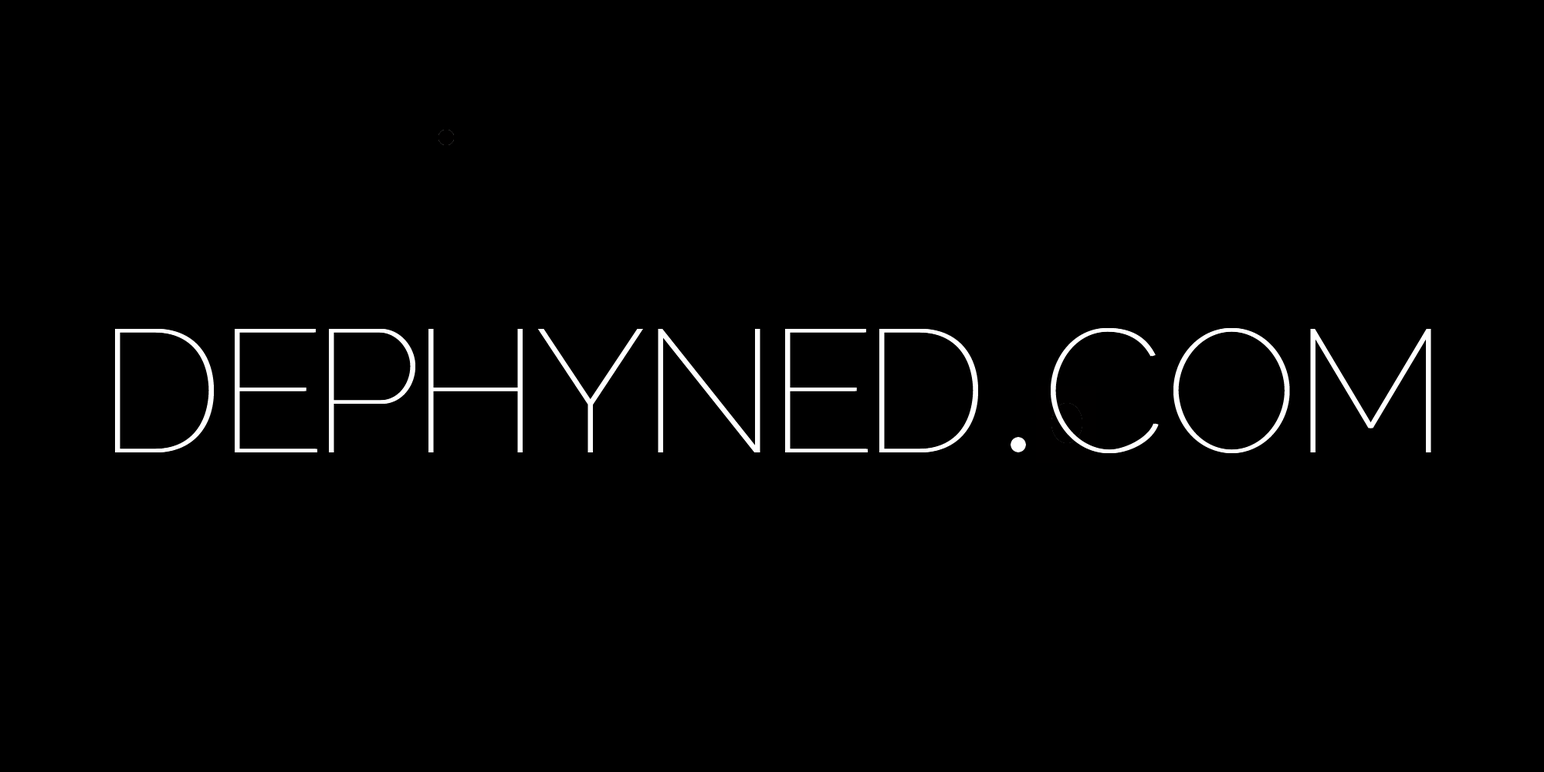
<style>
.page{position:relative;width:1544px;height:772px;background:#000000}
.page>*{position:absolute;margin:0}
.t1{font:173.7px "Raleway-Thin";color:#ffffff}
</style>
<div class="page">
<p class="t1" style="left:115px;top:328px;width:1315px;height:125px">DEPHYNED COM</p>
<p class="t1" style="left:117px;top:328px;width:1315px;height:125px">DEPHYNED COM</p>
</div>
